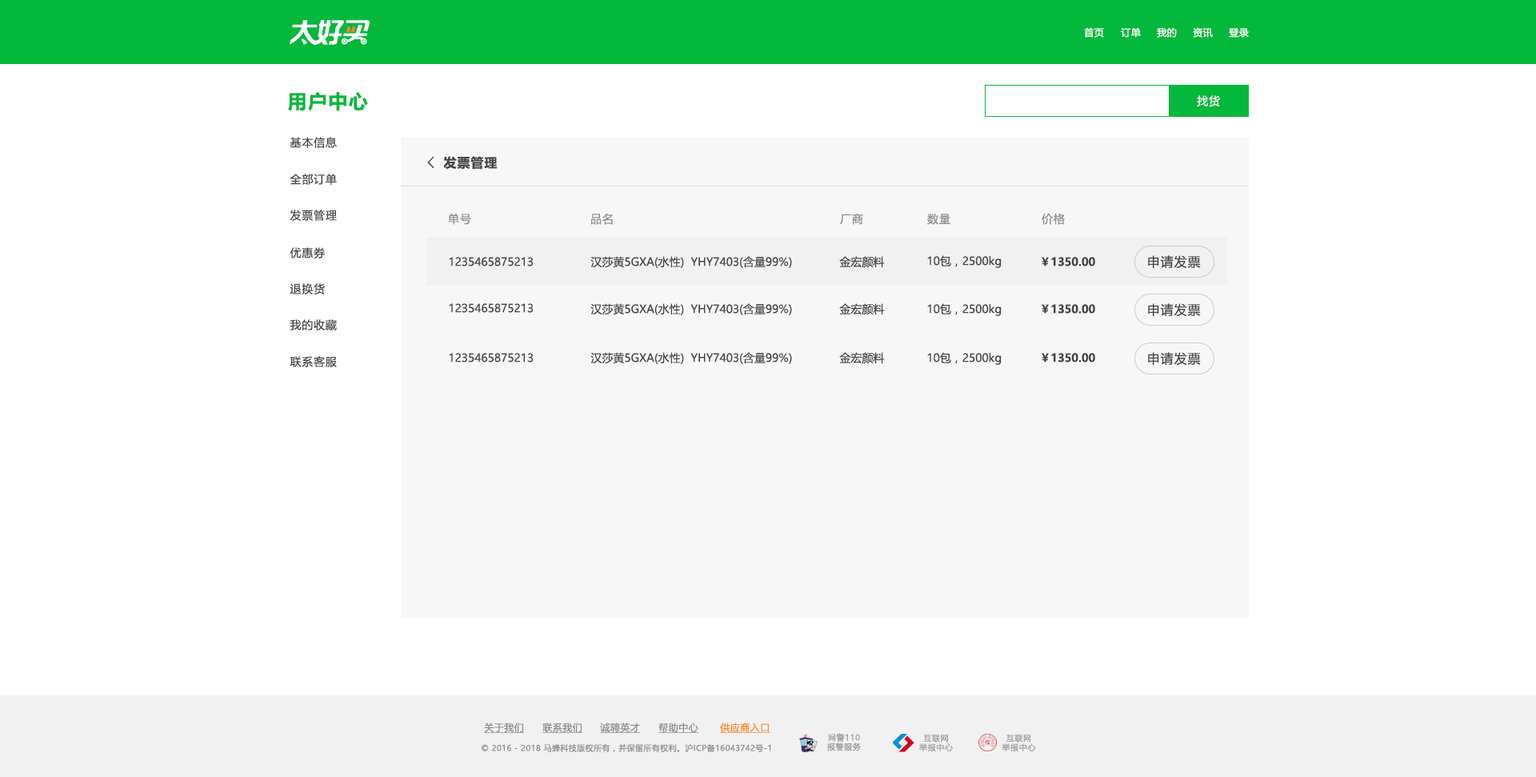
<style>
.page{position:relative;width:1536px;height:777px;background:#ffffff}
.page>*{position:absolute;margin:0}
.t1{font:9.6px "MicrosoftYaHeiUI";letter-spacing:0.04em;color:#ffffff}
.t2{font:19.2px "MicrosoftYaHeiUI-Bold";letter-spacing:0.06em;color:#04b83b}
.t3{font:11.2px "MicrosoftYaHei";letter-spacing:0.06em;color:#f7f7f7}
.t4{font:11.2px "MicrosoftYaHeiUI";letter-spacing:0.06em;color:#444444}
.t5{font:16px "FangSong";color:#444444;font-weight:bold}
.t6{font:12.8px "MicrosoftYaHeiUI-Bold";letter-spacing:0.06em;color:#444444}
.t7{font:11.2px "MicrosoftYaHeiUI";letter-spacing:0.06em;color:#8c8c8c}
.t8{font:11.2px "MicrosoftYaHeiUI";color:#444444}
.t9{font:11.2px "MicrosoftYaHeiUI-Bold";color:#444444}
.t10{font:12.8px "MicrosoftYaHeiUI";letter-spacing:0.06em;color:#444444}
.t11{font:9.6px "MicrosoftYaHeiUI";letter-spacing:0.04em;color:#8c8c8c;text-decoration:underline}
.t12{font:9.6px "MicrosoftYaHeiUI";letter-spacing:0.04em;color:#ff8b25;text-decoration:underline}
.t13{font:8px/9.3px "MicrosoftYaHei";letter-spacing:0.06em;color:#999999}
.t14{font:8px "MicrosoftYaHeiUI";letter-spacing:0.04em;color:#8c8c8c}
</style>
<div class="page">
<p class="t1" style="left:1084px;top:27px;width:20px;height:11px">首页</p>
<p class="t1" style="left:1120px;top:27px;width:20px;height:11px">订单</p>
<p class="t1" style="left:1156px;top:27px;width:20px;height:11px">我的</p>
<p class="t1" style="left:1192px;top:27px;width:20px;height:11px">资讯</p>
<p class="t1" style="left:1228px;top:28px;width:20px;height:10px">登录</p>
<p class="t2" style="left:288px;top:92px;width:80px;height:19px">用户中心</p>
<p class="t3" style="left:1196px;top:95px;width:24px;height:12px">找货</p>
<p class="t4" style="left:290px;top:137px;width:47px;height:11px">基本信息</p>
<p class="t5" style="left:427px;top:156px;width:7px;height:13px">&lt;</p>
<p class="t6" style="left:443px;top:156px;width:54px;height:14px">发票管理</p>
<p class="t4" style="left:290px;top:174px;width:47px;height:11px">全部订单</p>
<p class="t4" style="left:290px;top:210px;width:47px;height:11px">发票管理</p>
<p class="t7" style="left:448px;top:213px;width:23px;height:12px">单号</p>
<p class="t7" style="left:591px;top:213px;width:22px;height:12px">品名</p>
<p class="t7" style="left:840px;top:213px;width:23px;height:12px">厂商</p>
<p class="t7" style="left:927px;top:213px;width:23px;height:12px">数量</p>
<p class="t7" style="left:1041px;top:213px;width:23px;height:12px">价格</p>
<p class="t4" style="left:290px;top:247px;width:35px;height:11px">优惠券</p>
<p class="t8" style="left:449px;top:257px;width:84px;height:9px">1235465875213</p>
<p class="t8" style="left:590px;top:256px;width:202px;height:12px">汉莎黄5GXA(水性)  YHY7403(含量99%)</p>
<p class="t8" style="left:839px;top:256px;width:46px;height:12px">金宏颜料</p>
<p class="t8" style="left:927px;top:255px;width:74px;height:13px">10包，2500kg</p>
<p class="t9" style="left:1041px;top:257px;width:54px;height:9px">￥1350.00</p>
<p class="t10" style="left:1148px;top:255px;width:52px;height:13px">申请发票</p>
<p class="t4" style="left:290px;top:283px;width:35px;height:11px">退换货</p>
<p class="t8" style="left:449px;top:303px;width:84px;height:10px">1235465875213</p>
<p class="t8" style="left:590px;top:303px;width:202px;height:12px">汉莎黄5GXA(水性)  YHY7403(含量99%)</p>
<p class="t8" style="left:839px;top:303px;width:46px;height:12px">金宏颜料</p>
<p class="t8" style="left:927px;top:303px;width:74px;height:13px">10包，2500kg</p>
<p class="t9" style="left:1041px;top:304px;width:54px;height:10px">￥1350.00</p>
<p class="t10" style="left:1148px;top:303px;width:52px;height:13px">申请发票</p>
<p class="t4" style="left:290px;top:319px;width:47px;height:11px">我的收藏</p>
<p class="t8" style="left:449px;top:353px;width:84px;height:9px">1235465875213</p>
<p class="t8" style="left:590px;top:352px;width:202px;height:12px">汉莎黄5GXA(水性)  YHY7403(含量99%)</p>
<p class="t8" style="left:839px;top:352px;width:46px;height:12px">金宏颜料</p>
<p class="t8" style="left:927px;top:352px;width:74px;height:13px">10包，2500kg</p>
<p class="t9" style="left:1041px;top:353px;width:54px;height:9px">￥1350.00</p>
<p class="t10" style="left:1148px;top:352px;width:52px;height:13px">申请发票</p>
<p class="t4" style="left:290px;top:356px;width:47px;height:11px">联系客服</p>
<p class="t11" style="left:484px;top:722px;width:41px;height:11px">关于我们</p>
<p class="t11" style="left:542px;top:722px;width:41px;height:11px">联系我们</p>
<p class="t11" style="left:600px;top:722px;width:41px;height:11px">诚聘英才</p>
<p class="t11" style="left:658px;top:722px;width:41px;height:11px">帮助中心</p>
<p class="t12" style="left:720px;top:722px;width:50px;height:11px">供应商入口</p>
<p class="t13" style="left:827px;top:733px;width:34px;height:18px;text-align:center">网警110<br>报警服务</p>
<p class="t13" style="left:919px;top:733px;width:34px;height:18px;text-align:center">互联网<br>举报中心</p>
<p class="t13" style="left:1001px;top:733px;width:35px;height:18px;text-align:center">互联网<br>举报中心</p>
<p class="t14" style="left:481px;top:743px;width:290px;height:9px">© 2016 - 2018 马蜂科技版权所有，并保留所有权利。沪ICP备16043742号-1</p>
</div>
